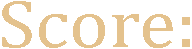
<style>
.page{position:relative;width:192px;height:49px;background:#ffffff}
.page>*{position:absolute;margin:0}
.t1{font:68.3px "CambriaMath";color:#e4c28d;scale:1.11 1}
</style>
<div class="page">
<p class="t1" style="left:2px;top:1px;width:188px;height:47px">Score:</p>
</div>
